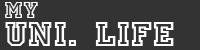
<style>
.page{position:relative;width:200px;height:50px;background:#333333}
.page>*{position:absolute;margin:0}
.t1{font:24px "PrincetownLET";letter-spacing:0.04em;color:#fffefe}
.t2{font:36px "PrincetownLET";letter-spacing:0.04em;color:#fffefe}
</style>
<div class="page">
<p class="t1" style="left:5px;top:2px;width:33px;height:16px">MY</p>
<p class="t2" style="left:5px;top:22px;width:71px;height:24px">uni.</p>
<p class="t2" style="left:95px;top:22px;width:79px;height:24px">life</p>
</div>
